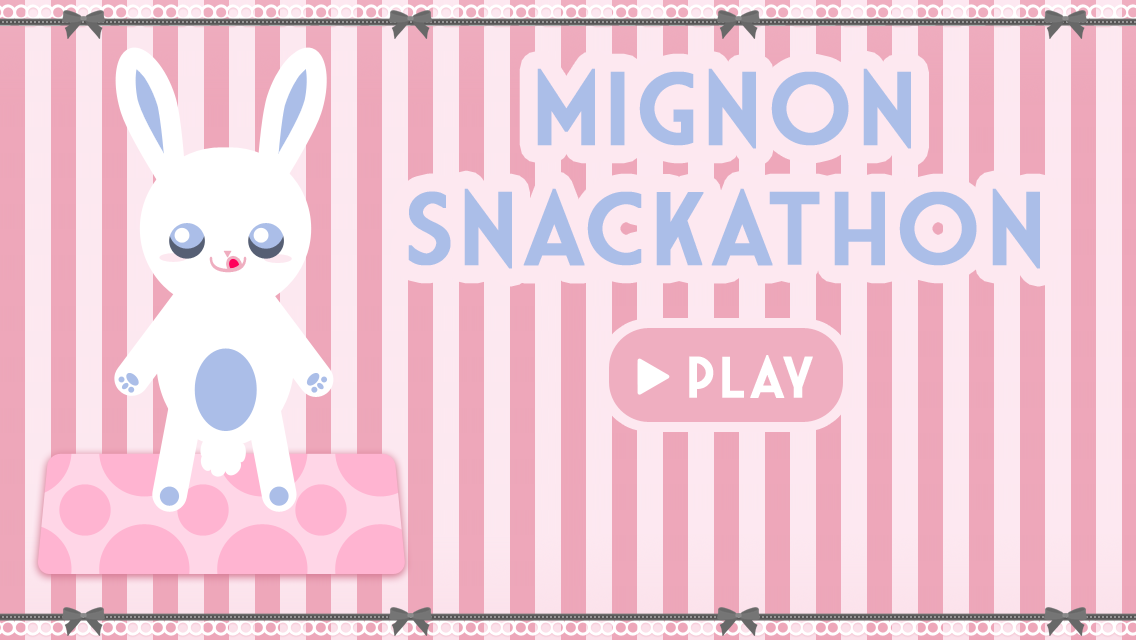
<style>
.page{position:relative;width:1136px;height:640px}
.page>*{position:absolute;margin:0}
.t1{font:100px "MarketDeco";letter-spacing:0.04em;color:#abbee8;font-weight:bold}
.t2{font:45.5px "QuicksandBook-Regular";color:#efaec0;scale:1.37 1}
.t3{font:56px "MarketDeco";letter-spacing:0.04em;color:#ffffff;font-weight:bold}
</style>
<div class="page">
<p class="t1" style="left:408px;top:68px;width:632px;height:201px;text-align:center">mignon<br>snackathon</p>
<p class="t2" style="left:209px;top:256px;width:38px;height:17px;rotate:90deg">)</p>
<p class="t3" style="left:689px;top:355px;width:124px;height:43px">play</p>
</div>
